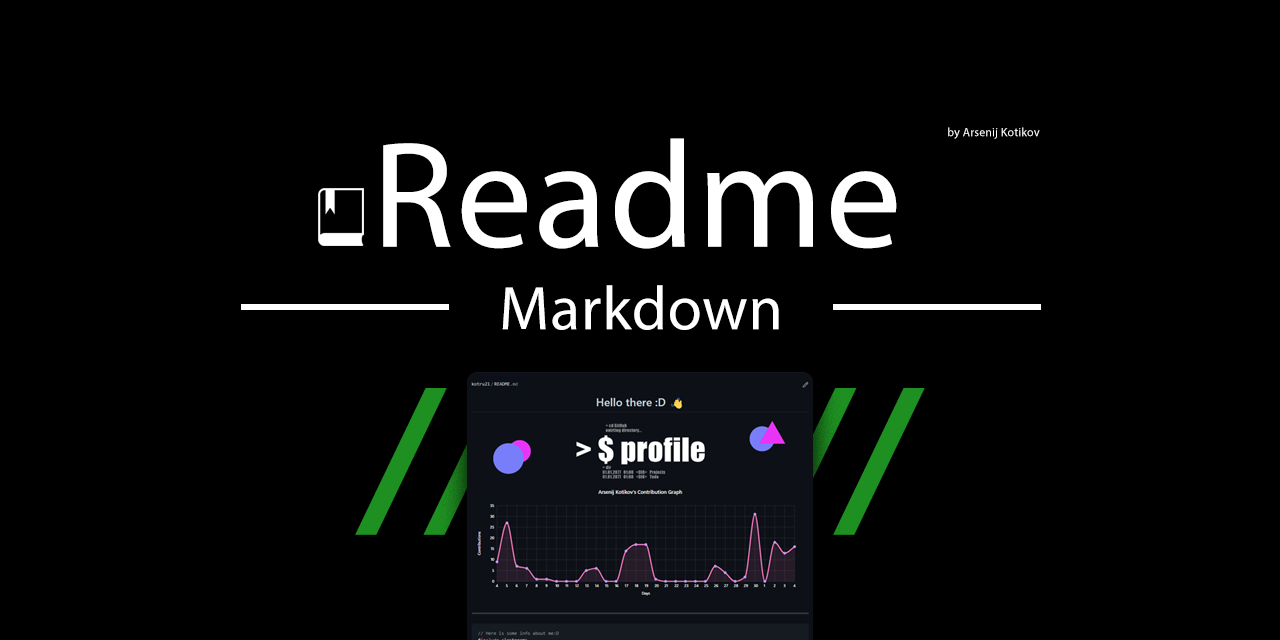
<style>
.page{position:relative;width:1280px;height:640px;background:#000000}
.page>*{position:absolute;margin:0}
.t1{font:12px "MyriadPro-Regular";letter-spacing:0.012em;color:#ffffff}
.t2{font:152px "MyriadPro-Regular";letter-spacing:0.012em;color:#ffffff}
.t3{font:62px "MyriadPro-Regular";letter-spacing:0.012em;color:#ffffff}
.t4{font:202px "MyriadPro-BoldIt";letter-spacing:0.012em}
</style>
<div class="page">
<p class="t1" style="left:948px;top:127px;width:92px;height:12px">by Arsenij Kotikov</p>
<p class="t2" style="left:383px;top:138px;width:514px;height:111px">Readme</p>
<p class="t3" style="left:502px;top:285px;width:277px;height:45px">Markdown</p>
<p class="t4" style="left:355px;top:388px;width:570px;height:147px">////////</p>
</div>
